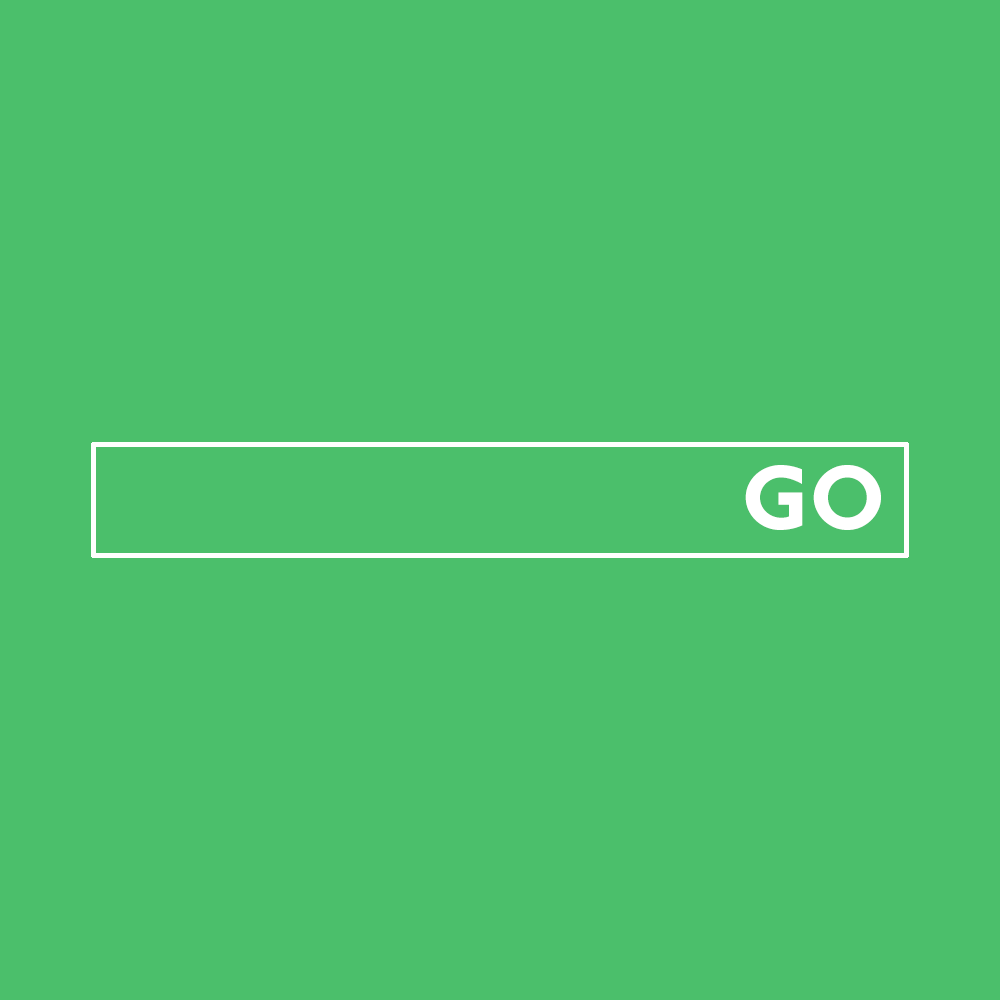
<style>
.page{position:relative;width:1000px;height:1000px;background:#4bbf6b}
.page>*{position:absolute;margin:0}
.t1{font:92.7px "JohnstonITC-BoldOS";color:#ffffff}
</style>
<div class="page">
<p class="t1" style="left:745px;top:465px;width:136px;height:65px">GO</p>
</div>
